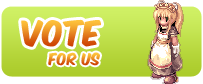
<style>
.page{position:relative;width:203px;height:84px;background:#ffffff}
.page>*{position:absolute;margin:0}
.t1{font:30px "KomikaAxis"}
.t2{font:14px "KomikaAxis"}
</style>
<div class="page">
<p class="t1" style="left:21px;top:19px;width:80px;height:28px">vote</p>
<p class="t2" style="left:48px;top:52px;width:52px;height:14px">for us</p>
</div>
